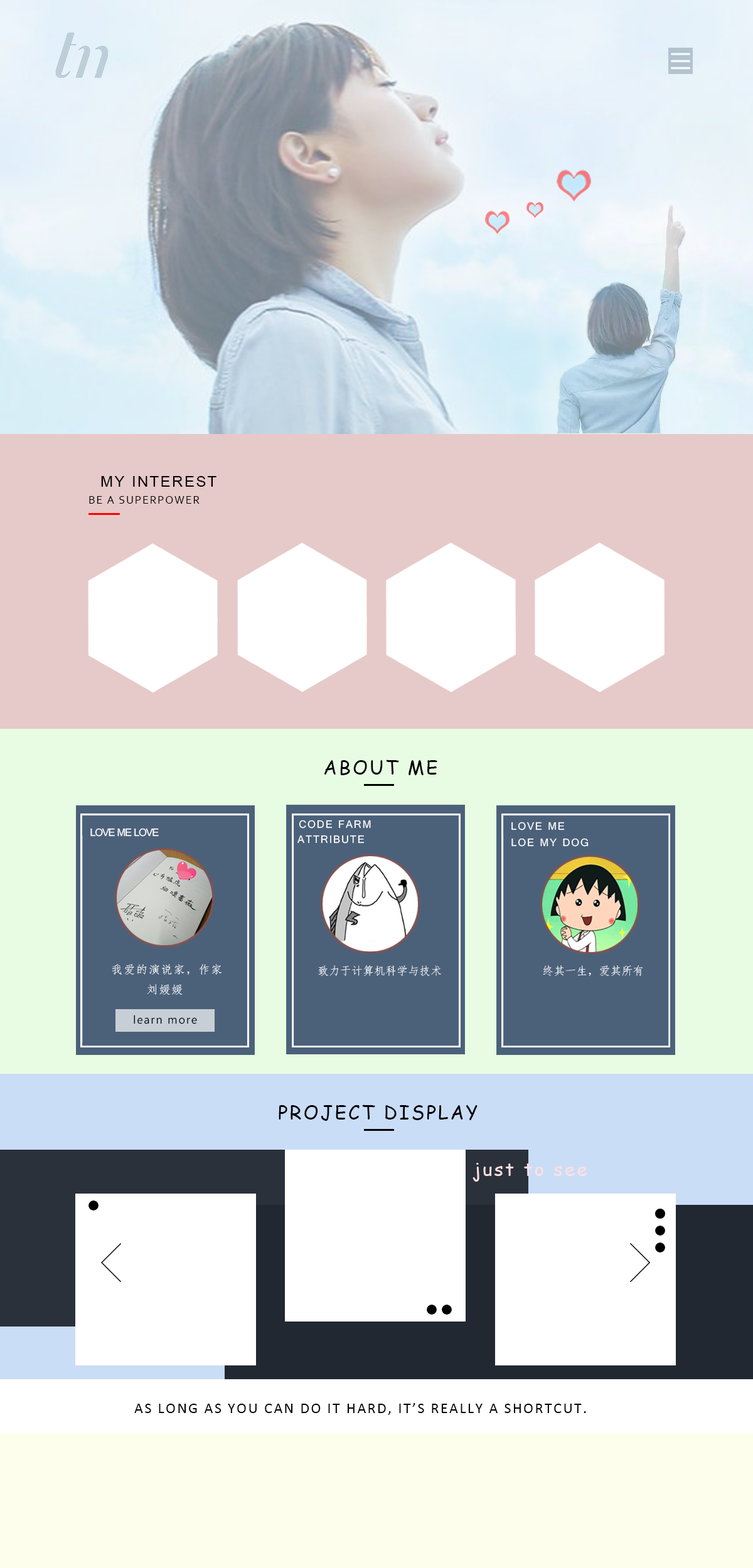
<style>
.page{position:relative;width:753px;height:1568px}
.page>*{position:absolute;margin:0}
.t1{font:15.1px "ArialMT";letter-spacing:0.1em;color:#000000}
.t2{font:11.3px "Corbel";letter-spacing:0.1em;color:#000000}
.t3{font:18.8px "ComicSansMS";letter-spacing:0.1em;color:#000000}
.t4{font:11.3px "Gautami";letter-spacing:0.1em;color:#ffffff}
.t5{font:11.3px "Gautami";letter-spacing:-0.075em;color:#ffffff}
.t6{font:11.3px "·ÂËÎ";letter-spacing:0.1em;color:#ffffff}
.t7{font:11.3px "·ÂËÎ";color:#ffffff}
.t8{font:11.3px "LaoUI";letter-spacing:0.1em;color:#000e1e}
.t9{font:18.8px "ComicSansMS";letter-spacing:0.1em;color:#ffe0e0}
.t10{font:15.1px "Calibri";letter-spacing:0.1em;color:#000000}
</style>
<div class="page">
<p class="t1" style="left:101px;top:476px;width:115px;height:11px">MY INTEREST</p>
<p class="t2" style="left:89px;top:496px;width:110px;height:8px">BE A SUPERPOWER</p>
<p class="t3" style="left:324px;top:760px;width:113px;height:15px">ABOUT ME</p>
<p class="t4" style="left:299px;top:820px;width:72px;height:9px">CODE FARM</p>
<p class="t4" style="left:511px;top:822px;width:53px;height:8px">LOVE ME</p>
<p class="t5" style="left:90px;top:828px;width:69px;height:9px">LOVE ME LOVE</p>
<p class="t4" style="left:297px;top:835px;width:67px;height:9px">ATTRIBUTE</p>
<p class="t4" style="left:511px;top:838px;width:77px;height:9px">LOE MY DOG</p>
<p class="t6" style="left:112px;top:964px;width:110px;height:11px">我爱的演说家，作家</p>
<p class="t7" style="left:318px;top:965px;width:123px;height:11px">致力于计算机科学与技术</p>
<p class="t7" style="left:543px;top:965px;width:100px;height:11px">终其一生，爱其所有</p>
<p class="t6" style="left:147px;top:984px;width:36px;height:11px">刘媛媛</p>
<p class="t8" style="left:134px;top:1015px;width:63px;height:9px">learn more</p>
<p class="t3" style="left:278px;top:1104px;width:199px;height:17px">PROJECT DISPLAY</p>
<p class="t9" style="left:472px;top:1163px;width:115px;height:19px">just to see</p>
<p class="t10" style="left:134px;top:1403px;width:452px;height:12px">AS LONG AS YOU CAN DO IT HARD, IT’S REALLY A SHORTCUT.</p>
</div>
